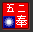
<style>
.page{position:relative;width:33px;height:32px;background:#f20000}
.page>*{position:absolute;margin:0}
.t1{font:10.4px "SimSun";color:#ffffff}
.t2{font:11.7px "SimSun";color:#ffffff}
</style>
<div class="page">
<p class="t1" style="left:7px;top:4px;width:18px;height:8px">五二</p>
<p class="t2" style="left:16px;top:15px;width:11px;height:12px">奉</p>
</div>
